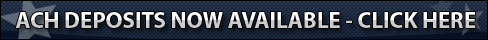
<style>
.page{position:relative;width:488px;height:40px}
.page>*{position:absolute;margin:0}
.t1{font:23px "Myriad-Bold"}
</style>
<div class="page">
<p class="t1" style="left:15px;top:12px;width:461px;height:16px">ACH DEPOSITS NOW AVAILABLE - CLICK HERE</p>
</div>
